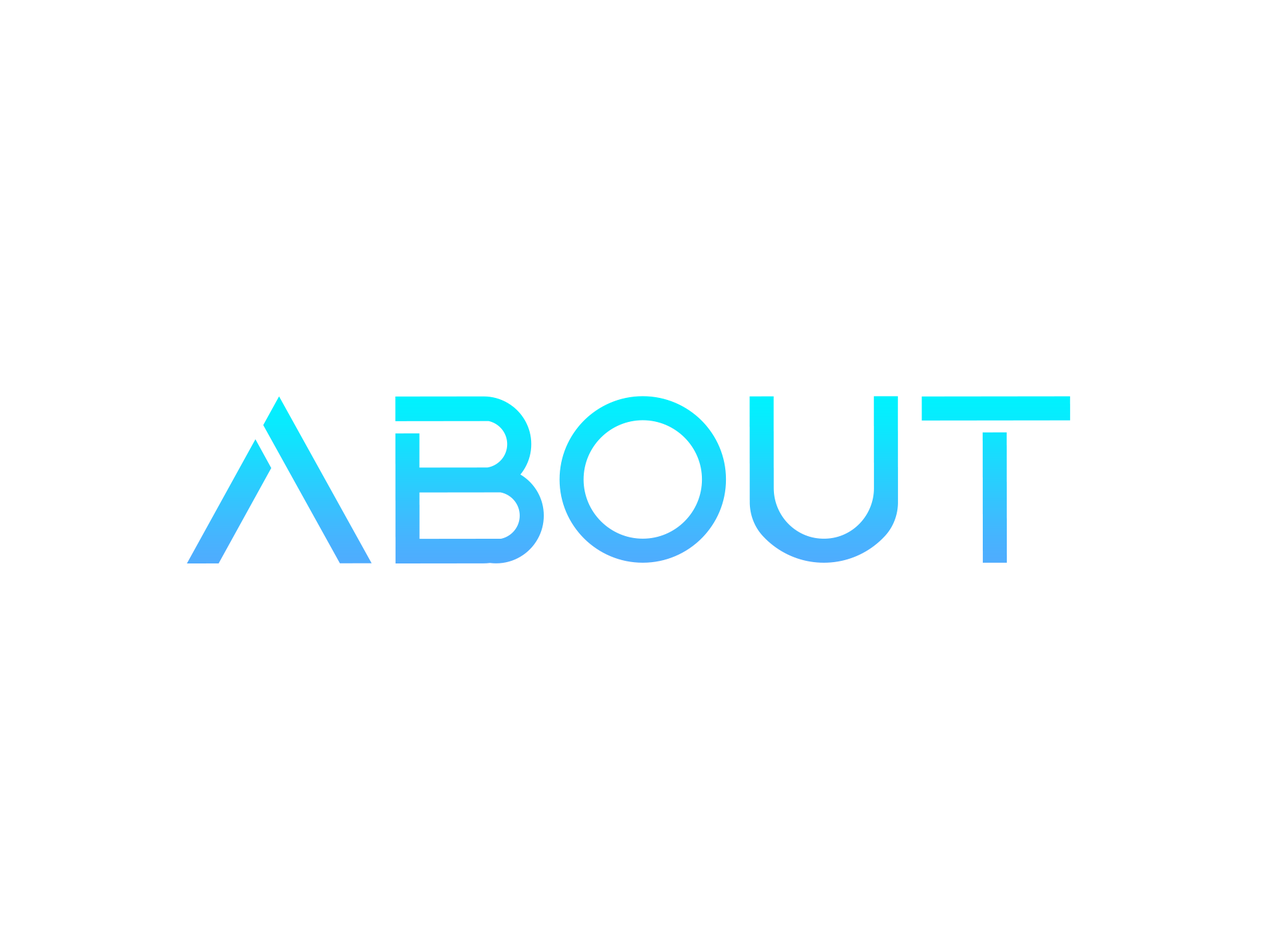
<style>
.page{position:relative;width:1261px;height:946px;background:#ffffff}
.page>*{position:absolute;margin:0}
.t1{font:250.2px "AquireRegular"}
</style>
<div class="page">
<p class="t1" style="left:187px;top:396px;width:883px;height:167px">ABOUT</p>
</div>
